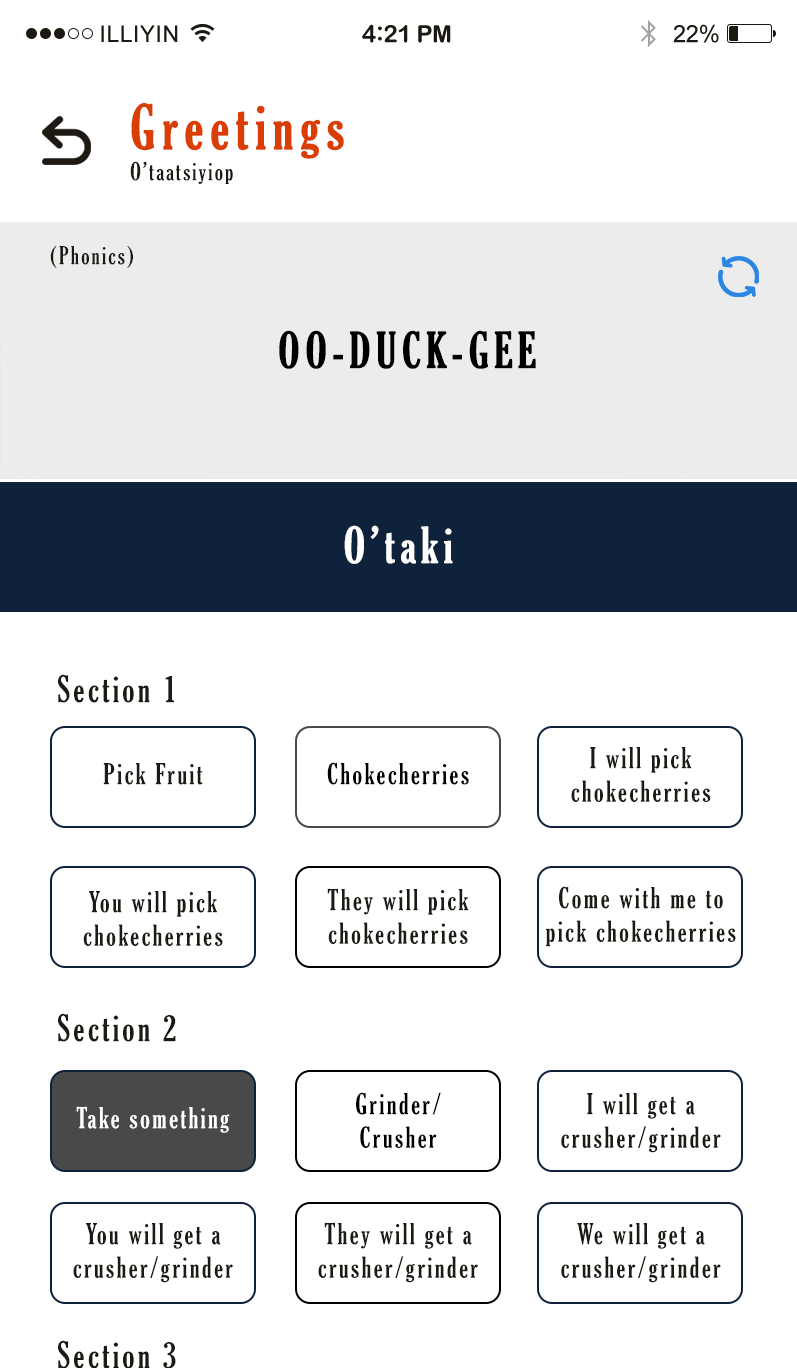
<style>
.page{position:relative;width:797px;height:1368px;background:#ffffff}
.page>*{position:absolute;margin:0}
.t1{font:23px "ArialMT";letter-spacing:0.02em;color:#1c1912}
.t2{font:24px "ArialRoundedMTBold";letter-spacing:-0.02em;color:#1c1912}
.t3{font:26px "ArialRoundedMTBold";letter-spacing:-0.02em;color:#1c1912}
.t4{font:24px "ArialMT";letter-spacing:-0.02em;color:#1c1912}
.t5{font:60px "GloucesterMT-ExtraCondensed";letter-spacing:0.09em;color:#d93e04;font-weight:bold}
.t6{font:24px "GloucesterMT-ExtraCondensed";letter-spacing:0.09em;color:#1d1a13}
.t7{font:48px "GloucesterMT-ExtraCondensed";letter-spacing:0.09em;color:#000000;font-weight:bold}
.t8{font:48px "GloucesterMT-ExtraCondensed";letter-spacing:0.09em;color:#ffffff;font-weight:bold}
.t9{font:36px "GloucesterMT-ExtraCondensed";letter-spacing:0.09em;color:#1d1a13}
.t10{font:28px "GloucesterMT-ExtraCondensed";letter-spacing:0.09em;color:#1d1a13}
.t11{font:28px "GloucesterMT-ExtraCondensed";letter-spacing:0.09em;color:#000000}
.t12{font:28px "GloucesterMT-ExtraCondensed";letter-spacing:0.09em;color:#ffffff}
</style>
<div class="page">
<p class="t1" style="left:101px;top:25px;width:77px;height:17px">ILLIYIN</p>
<p class="t2" style="left:362px;top:24px;width:89px;height:19px">4<span class="t3">:</span>21 PM</p>
<p class="t4" style="left:673px;top:24px;width:46px;height:19px">22%</p>
<p class="t5" style="left:131px;top:103px;width:213px;height:56px">Greetings</p>
<p class="t6" style="left:130px;top:161px;width:103px;height:23px">O’taatsiyiop</p>
<p class="t6" style="left:50px;top:245px;width:83px;height:23px">(Phonics)</p>
<p class="t7" style="left:279px;top:330px;width:257px;height:39px">OO-DUCK-GEE</p>
<p class="t8" style="left:344px;top:525px;width:109px;height:39px">O’taki</p>
<p class="t9" style="left:58px;top:674px;width:116px;height:29px">Section 1</p>
<p class="t10" style="left:571px;top:747px;width:140px;height:55px;text-align:center">I will pick<br>chokecherries</p>
<p class="t10" style="left:103px;top:763px;width:100px;height:22px">Pick Fruit</p>
<p class="t11" style="left:327px;top:762px;width:142px;height:23px">Chokecherries</p>
<p class="t10" style="left:83px;top:891px;width:140px;height:55px;text-align:center">You will pick<br>chokecherries</p>
<p class="t10" style="left:327px;top:888px;width:142px;height:56px;text-align:center">They will pick<br>chokecherries</p>
<p class="t10" style="left:546px;top:886px;width:190px;height:61px;text-align:center">Come with me to pick chokecherries</p>
<p class="t9" style="left:58px;top:1013px;width:118px;height:29px">Section 2</p>
<p class="t11" style="left:356px;top:1092px;width:85px;height:56px;text-align:center">Grinder/<br>Crusher</p>
<p class="t10" style="left:561px;top:1093px;width:160px;height:60px;text-align:center">I will get a crusher/grinder</p>
<p class="t12" style="left:76px;top:1106px;width:154px;height:27px">Take something</p>
<p class="t10" style="left:73px;top:1223px;width:160px;height:60px;text-align:center">You will get a crusher/grinder</p>
<p class="t10" style="left:318px;top:1222px;width:160px;height:61px;text-align:center">They will get a crusher/grinder</p>
<p class="t10" style="left:561px;top:1223px;width:160px;height:60px;text-align:center">We will get a crusher/grinder</p>
<p class="t9" style="left:58px;top:1340px;width:118px;height:29px">Section 3</p>
</div>
